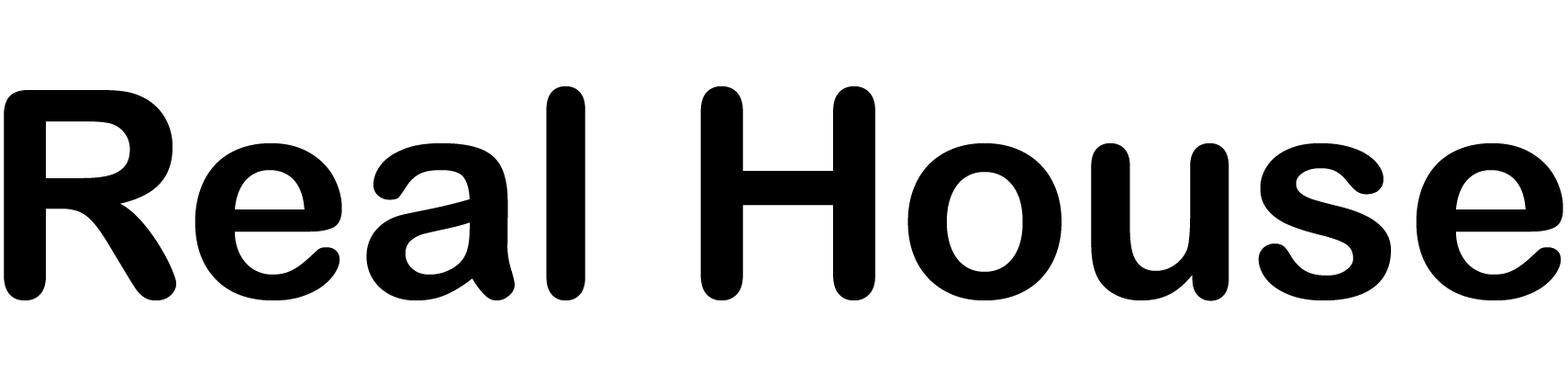
<style>
.page{position:relative;width:1568px;height:384px;background:#ffffff}
.page>*{position:absolute;margin:0}
.t1{font:289.4px "ArialRoundedMTBold";color:#000000}
</style>
<div class="page">
<p class="t1" style="left:4px;top:86px;width:1559px;height:215px">Real House</p>
</div>
